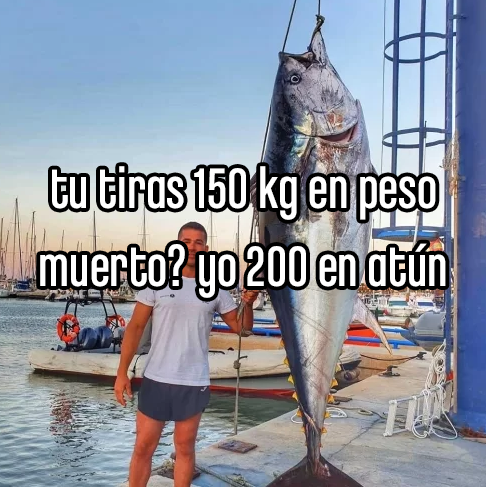
<style>
.page{position:relative;width:486px;height:487px}
.page>*{position:absolute;margin:0}
.t1{font:60.4px "ChaletComprime-CologneEighty";color:#ffffff}
</style>
<div class="page">
<p class="t1" style="left:40px;top:166px;width:406px;height:132px;text-align:center">tu tiras 150 kg en peso<br>muerto? yo 200 en atún</p>
</div>
